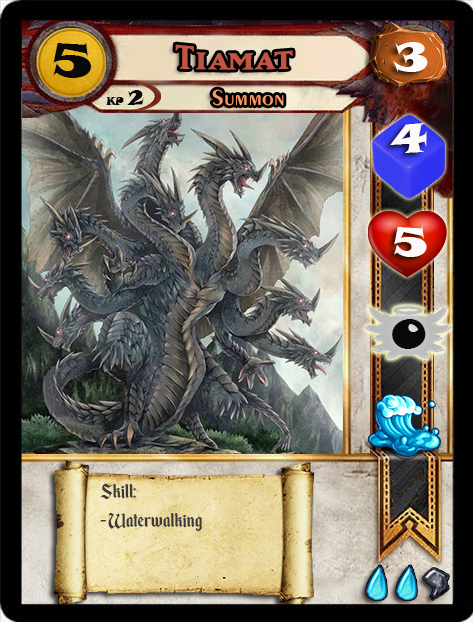
<style>
.page{position:relative;width:473px;height:622px}
.page>*{position:absolute;margin:0}
.t1{font:46.6px "SnapITC-Regular";color:#090909;scale:1.05 1}
.t2{font:40px "MatrixBoldSmallCaps";color:#c25443;scale:1.06 1}
.t3{font:40px "SnapITC-Regular";color:#fef9f9;scale:1.05 1}
.t4{font:22.7px "Exotic350BT-DemiBold";color:#f89c64;scale:1.06 1}
.t5{font:20.5px "SnapITC-Regular";color:#090909}
.t6{font:40px "SnapITC-Regular";color:#090909;scale:1.05 1}
.t7{font:24px "EnchantedLand";color:#3e3939}
</style>
<div class="page">
<p class="t1" style="left:53px;top:42px;width:38px;height:36px">5</p>
<p class="t2" style="left:175px;top:44px;width:118px;height:26px">Tiamat</p>
<p class="t3" style="left:393px;top:42px;width:35px;height:30px">3</p>
<p class="t4" style="left:212px;top:89px;width:72px;height:17px">Summon</p>
<p class="t5" style="left:127px;top:90px;width:17px;height:15px">2</p>
<p class="t3" style="left:390px;top:123px;width:37px;height:30px">4</p>
<p class="t3" style="left:394px;top:226px;width:33px;height:31px">5</p>
<p class="t6" style="left:392px;top:319px;width:34px;height:30px">0</p>
<p class="t7" style="left:100px;top:483px;width:102px;height:48px">Skill:<br>- Waterwalking</p>
</div>
